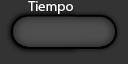
<style>
.page{position:relative;width:128px;height:64px;background:#333333}
.page>*{position:absolute;margin:0}
.t1{font:14px "MyriadPro-Regular";color:#ffffff}
</style>
<div class="page">
<p class="t1" style="left:28px;top:1px;width:45px;height:13px">Tiempo</p>
</div>
